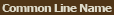
<style>
.page{position:relative;width:114px;height:15px;background:#503517}
.page>*{position:absolute;margin:0}
.t1{font:11px "Verdana-Bold";letter-spacing:-0.08em;color:#dedbcb}
</style>
<div class="page">
<p class="t1" style="left:2px;top:4px;width:110px;height:8px">Common Line Name</p>
</div>
